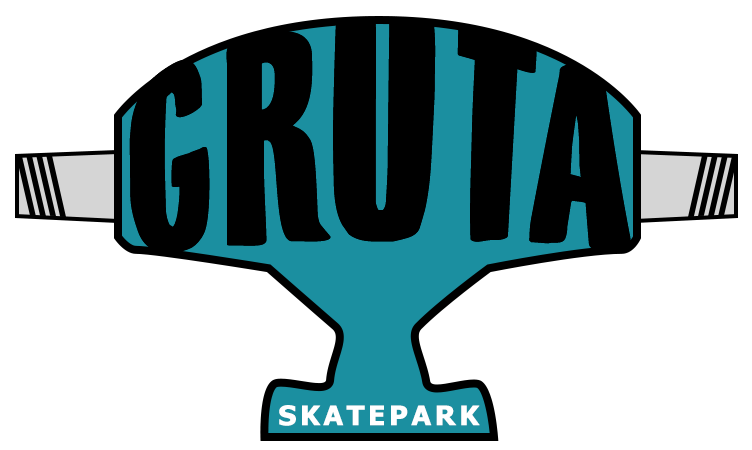
<style>
.page{position:relative;width:752px;height:450px;background:#ffffff}
.page>*{position:absolute;margin:0}
.t1{font:210px "MineheadDEMO-Regular";letter-spacing:0.025em;color:#000000;scale:1.2 1}
.t2{font:26.4px "Tahoma-Bold";letter-spacing:0.1em;color:#ffffff;font-weight:bold;scale:1.08 1}
</style>
<div class="page">
<p class="t1" style="left:129px;top:18px;width:503px;height:235px">GRUTA</p>
<p class="t1" style="left:129px;top:18px;width:503px;height:235px">GRUTA</p>
<p class="t2" style="left:279px;top:405px;width:201px;height:21px">SKATEPARK</p>
</div>
